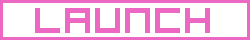
<style>
.page{position:relative;width:250px;height:40px;background:#ffffff}
.page>*{position:absolute;margin:0}
.t1{font:50px "VisitorTT1BRK";color:#ec68c2}
</style>
<div class="page">
<p class="t1" style="left:35px;top:8px;width:175px;height:25px">Launch</p>
</div>
